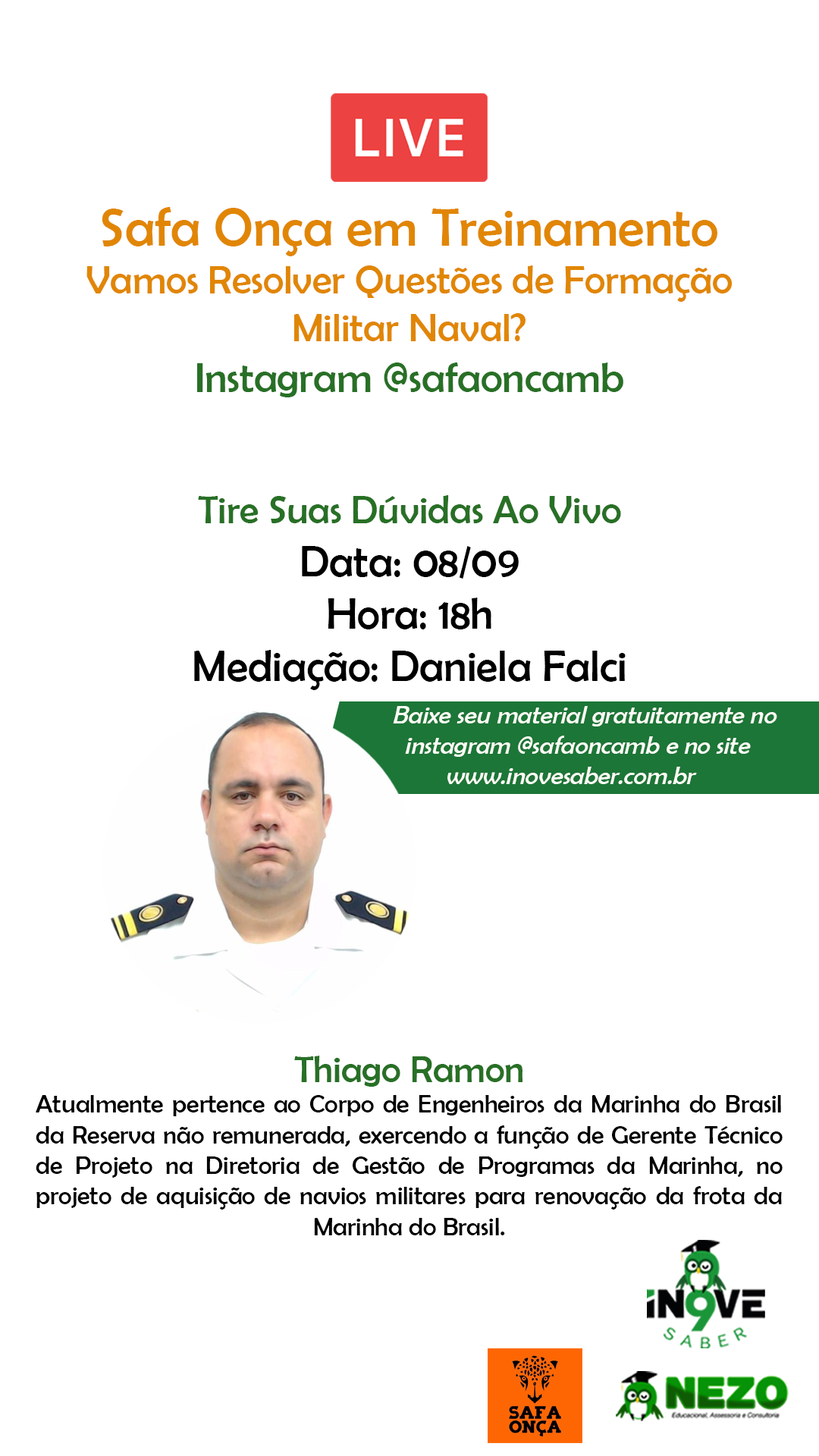
<style>
.page{position:relative;width:819px;height:1456px;background:#ffffff}
.page>*{position:absolute;margin:0}
.t1{font:40px "BerlinSansFB-Reg";color:#e18604}
.t2{font:54.1px "BerlinSansFB-Reg";color:#e18604}
.t3{font:42.3px "BerlinSansFB-Reg";color:#287026}
.t4{font:43.8px "BerlinSansFB-Reg";color:#000000}
.t5{font:39.2px "BerlinSansFB-Reg";color:#287026}
.t6{font:25.7px "BerlinSansFB-Reg";color:#fcfcf5}
.t7{font:25.6px "BerlinSansFB-Reg";color:#000000}
.t8{font:37.7px "BerlinSansFB-Reg";color:#287026}
</style>
<div class="page">
<p class="t1" style="left:86px;top:207px;width:647px;height:190px;text-align:center"><span class="t2">Safa Onça em Treinamento<br></span>Vamos Resolver Questões de Formação Militar Naval?<br><span class="t3">Instagram @safaoncamb</span></p>
<p class="t4" style="left:194px;top:495px;width:432px;height:195px;text-align:center"><span class="t5">Tire Suas Dúvidas Ao Vivo<br></span>Data: 08/09<br>Hora: 18h<br>Mediação: Daniela Falci</p>
<p class="t6" style="left:393px;top:706px;width:384px;height:78px;text-align:center">Baixe seu material gratuitamente no instagram @safaoncamb e no site www.inovesaber.com.br</p>
<p class="t7" style="left:36px;top:1056px;width:747px;height:179px;text-align:justify"><span class="t8">Thiago Ramon<br></span>Atualmente pertence ao Corpo de Engenheiros da Marinha do Brasil da Reserva não remunerada, exercendo a função de Gerente Técnico de Projeto na Diretoria de Gestão de Programas da Marinha, no projeto de aquisição de navios militares para renovação da frota da Marinha do Brasil.</p>
</div>
